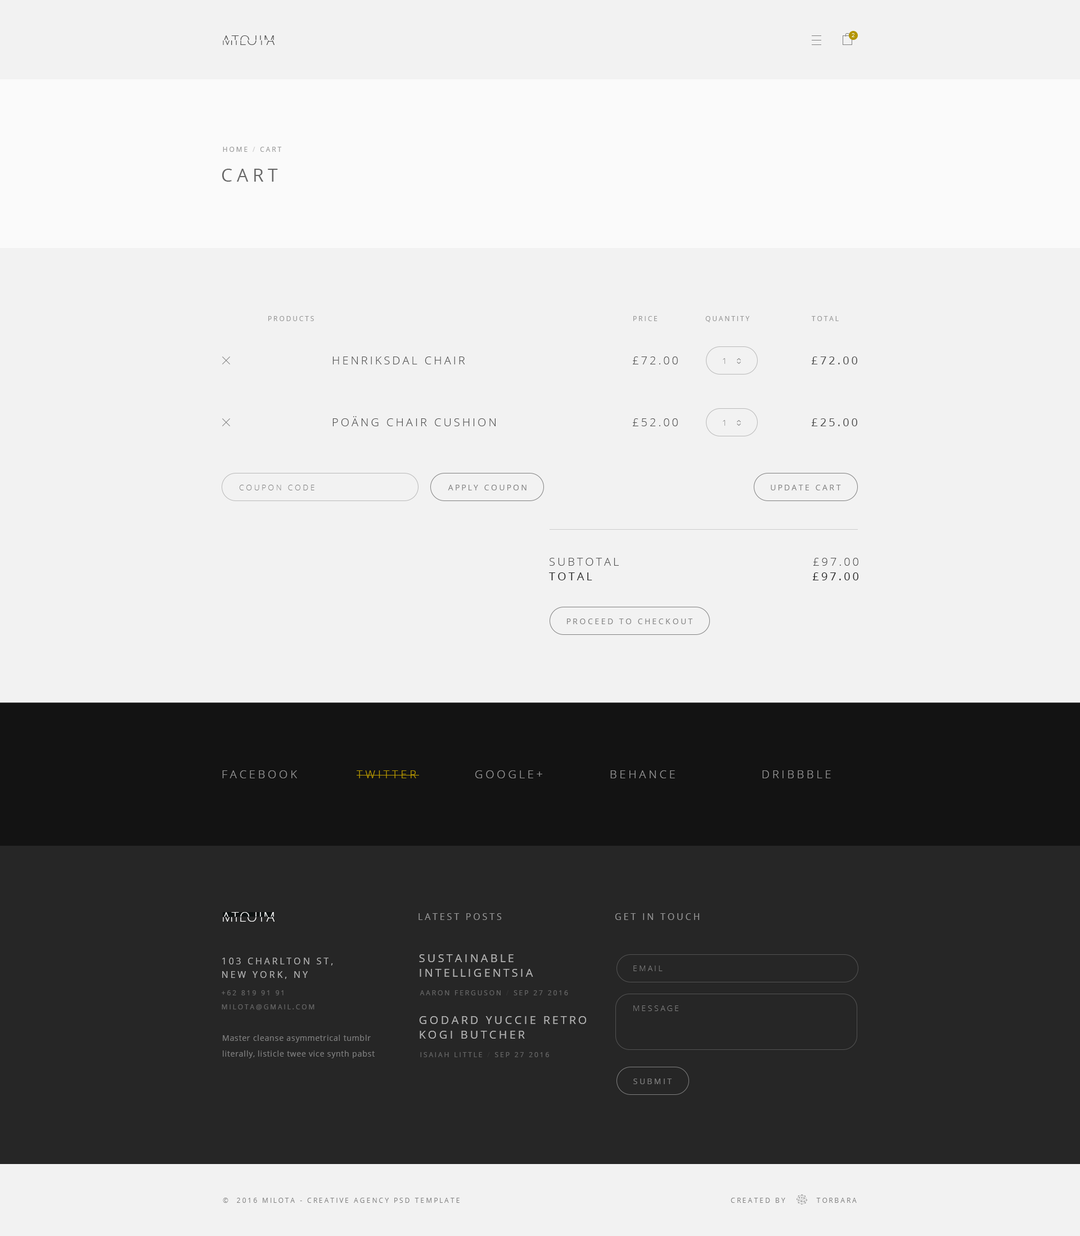
<style>
.page{position:relative;width:1080px;height:1236px;background:#f2f2f2}
.page>*{position:absolute;margin:0}
.t1{font:13.5px "OpenSans-Light";letter-spacing:0.08em;text-transform:uppercase}
.t2{font:5.6px "OpenSans-Light";letter-spacing:0.28em;color:#ffffff;text-transform:uppercase}
.t3{font:6.8px "OpenSans";letter-spacing:0.24em;color:#999999;text-transform:uppercase}
.t4{font:6.8px "OpenSans";letter-spacing:0.24em;color:#cccccc;text-transform:uppercase}
.t5{font:18px "OpenSans";letter-spacing:0.24em;color:#666666;text-transform:uppercase}
.t6{font:11.2px "OpenSans-Light";letter-spacing:0.2em;color:#4d4d4d;text-transform:uppercase}
.t7{font:7.9px "OpenSans-Light";letter-spacing:0.24em;color:#808080;text-transform:uppercase}
.t8{font:11.2px "OpenSans";letter-spacing:0.2em;color:#4d4d4d;text-transform:uppercase}
.t9{font:7.9px "OpenSans";letter-spacing:0.24em;color:#808080;text-transform:uppercase}
.t10{font:11.2px/14.6px "OpenSans-Light";letter-spacing:0.2em;color:#4d4d4d;text-transform:uppercase}
.t11{font:11.2px/14.6px "OpenSans";letter-spacing:0.2em;color:#262626;text-transform:uppercase}
.t12{font:11.2px "OpenSans-Light";letter-spacing:0.24em;color:#999999;text-transform:uppercase}
.t13{font:11.2px "OpenSans-Light";letter-spacing:0.24em;color:#b39500;text-transform:uppercase}
.t14{font:9px "OpenSans";letter-spacing:0.24em;color:#999999;text-transform:uppercase}
.t15{font:9px/13.5px "OpenSans";letter-spacing:0.24em;color:#b3b3b3;text-transform:uppercase}
.t16{font:11.2px/14.6px "OpenSans";letter-spacing:0.2em;color:#b3b3b3;text-transform:uppercase}
.t17{font:6.8px "OpenSans";letter-spacing:0.24em;color:#666666;text-transform:uppercase}
.t18{font:6.8px "OpenSans";letter-spacing:0.24em;color:#333333;text-transform:uppercase}
.t19{font:7.9px/15.8px "OpenSans";letter-spacing:0.04em;color:#808080}
.t20{font:6.8px "OpenSans";letter-spacing:0.24em;color:#808080;text-transform:uppercase}
</style>
<div class="page">
<p class="t1" style="left:222px;top:35px;width:52px;height:10px;rotate:180deg">milota</p>
<p class="t1" style="left:223px;top:35px;width:51px;height:10px">milota</p>
<p class="t2" style="left:852px;top:33px;width:2px;height:4px">2</p>
<p class="t3" style="left:223px;top:147px;width:59px;height:5px">home <span class="t4">/</span> cart</p>
<p class="t5" style="left:222px;top:169px;width:56px;height:13px">Cart</p>
<p class="t3" style="left:268px;top:316px;width:46px;height:5px">Products</p>
<p class="t3" style="left:633px;top:316px;width:25px;height:5px">Price</p>
<p class="t3" style="left:705px;top:316px;width:45px;height:6px">Quantity</p>
<p class="t3" style="left:812px;top:316px;width:27px;height:5px">Total</p>
<p class="t6" style="left:332px;top:357px;width:133px;height:7px">HENRIKSDAL Chair</p>
<p class="t6" style="left:632px;top:357px;width:46px;height:7px">£72.00</p>
<p class="t7" style="left:723px;top:358px;width:2px;height:6px">1</p>
<p class="t8" style="left:812px;top:357px;width:45px;height:7px">£72.00</p>
<p class="t6" style="left:332px;top:416px;width:164px;height:10px">POÄNG Chair cushion</p>
<p class="t6" style="left:632px;top:418px;width:46px;height:8px">£52.00</p>
<p class="t7" style="left:723px;top:420px;width:2px;height:6px">1</p>
<p class="t8" style="left:812px;top:418px;width:45px;height:8px">£25.00</p>
<p class="t7" style="left:239px;top:485px;width:75px;height:5px">Coupon code</p>
<p class="t9" style="left:448px;top:485px;width:78px;height:5px">apply coupon</p>
<p class="t9" style="left:771px;top:485px;width:70px;height:5px">Update cart</p>
<p class="t10" style="left:549px;top:558px;width:70px;height:22px">Subtotal<br><span class="t11">Total</span></p>
<p class="t10" style="left:813px;top:558px;width:45px;height:22px;text-align:right">£97.00<br><span class="t11">£97.00</span></p>
<p class="t9" style="left:567px;top:619px;width:125px;height:5px">proceed to checkout</p>
<p class="t12" style="left:222px;top:771px;width:75px;height:7px">facebook</p>
<p class="t13" style="left:357px;top:771px;width:62px;height:7px">Twitter</p>
<p class="t12" style="left:475px;top:771px;width:67px;height:7px">Google+</p>
<p class="t12" style="left:610px;top:771px;width:65px;height:7px">Behance</p>
<p class="t12" style="left:762px;top:771px;width:69px;height:7px">dribbble</p>
<p class="t1" style="left:222px;top:912px;width:52px;height:10px;rotate:180deg">milota</p>
<p class="t1" style="left:223px;top:912px;width:51px;height:10px">milota</p>
<p class="t14" style="left:418px;top:914px;width:84px;height:6px">Latest posts</p>
<p class="t14" style="left:615px;top:914px;width:84px;height:6px">Get in touch</p>
<p class="t15" style="left:222px;top:958px;width:111px;height:21px">103 Charlton St, <br>New York, NY</p>
<p class="t16" style="left:419px;top:955px;width:114px;height:22px">Sustainable intelligentsia butcher</p>
<p class="t7" style="left:633px;top:966px;width:30px;height:5px">Email</p>
<p class="t17" style="left:222px;top:991px;width:62px;height:5px">+62 819 91 91</p>
<p class="t17" style="left:420px;top:991px;width:148px;height:5px">Aaron Ferguson <span class="t18">/</span> Sep 27 2016</p>
<p class="t17" style="left:222px;top:1005px;width:92px;height:5px">milota@gmail.com</p>
<p class="t7" style="left:633px;top:1006px;width:45px;height:5px">Message</p>
<p class="t16" style="left:419px;top:1016px;width:167px;height:23px">Godard yuccie retro kogi butcher</p>
<p class="t19" style="left:223px;top:1035px;width:152px;height:24px">Master cleanse asymmetrical tumblr literally, listicle twee vice synth pabst<br> fixie etsy squid.</p>
<p class="t17" style="left:420px;top:1052px;width:129px;height:6px">Isaiah Little <span class="t18">/</span> Sep 27 2016</p>
<p class="t9" style="left:633px;top:1079px;width:39px;height:5px">submit</p>
<p class="t20" style="left:223px;top:1198px;width:237px;height:5px">©  2016 MIlota - Creative agency psd template</p>
<p class="t20" style="left:731px;top:1198px;width:126px;height:5px">Created by         Torbara</p>
</div>
